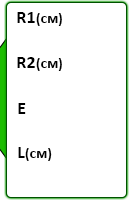
<style>
.page{position:relative;width:129px;height:200px;background:#ffffff}
.page>*{position:absolute;margin:0}
.t1{font:14px "Calibri-Bold";letter-spacing:0.01em;color:#000000;font-variant:small-caps}
.t2{font:18px "Calibri-Bold";letter-spacing:0.01em;color:#000000;font-variant:small-caps}
</style>
<div class="page">
<p class="t1" style="left:17px;top:12px;width:45px;height:14px"><span class="t2">R1</span>(см)</p>
<p class="t1" style="left:17px;top:57px;width:45px;height:14px"><span class="t2">R2</span>(см)</p>
<p class="t2" style="left:18px;top:103px;width:8px;height:11px">E</p>
<p class="t1" style="left:18px;top:147px;width:34px;height:14px"><span class="t2">L</span>(см)</p>
</div>
